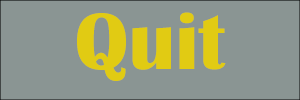
<style>
.page{position:relative;width:300px;height:100px;background:#8a9593}
.page>*{position:absolute;margin:0}
.t1{font:82.8px "BritannicBold";color:#e1cb13}
</style>
<div class="page">
<p class="t1" style="left:77px;top:12px;width:149px;height:69px">Quit</p>
</div>
